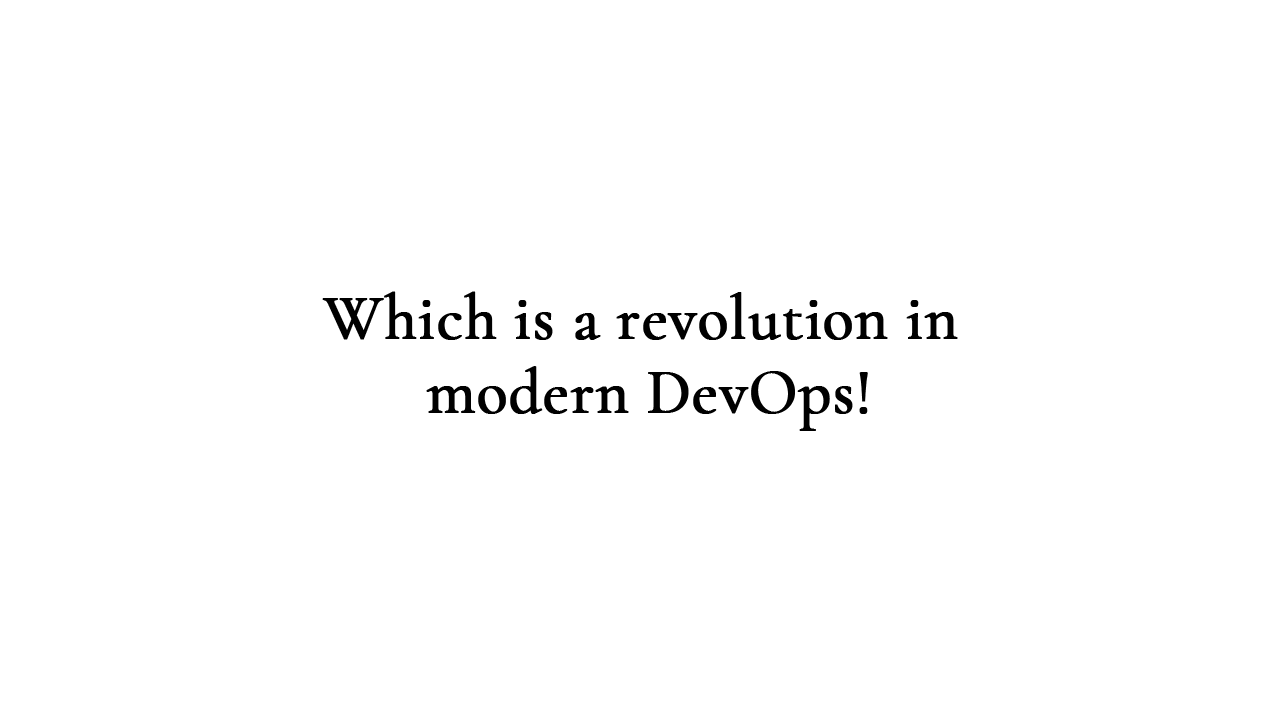
<style>
.page{position:relative;width:1280px;height:720px;background:#ffffff}
.page>*{position:absolute;margin:0}
.t1{font:63.2px/74.7px "CormorantGaramond-Medium";color:#000000;font-weight:bold}
</style>
<div class="page">
<p class="t1" style="left:322px;top:291px;width:636px;height:140px;text-align:center">Which is a revolution in <br>modern DevOps!</p>
</div>
